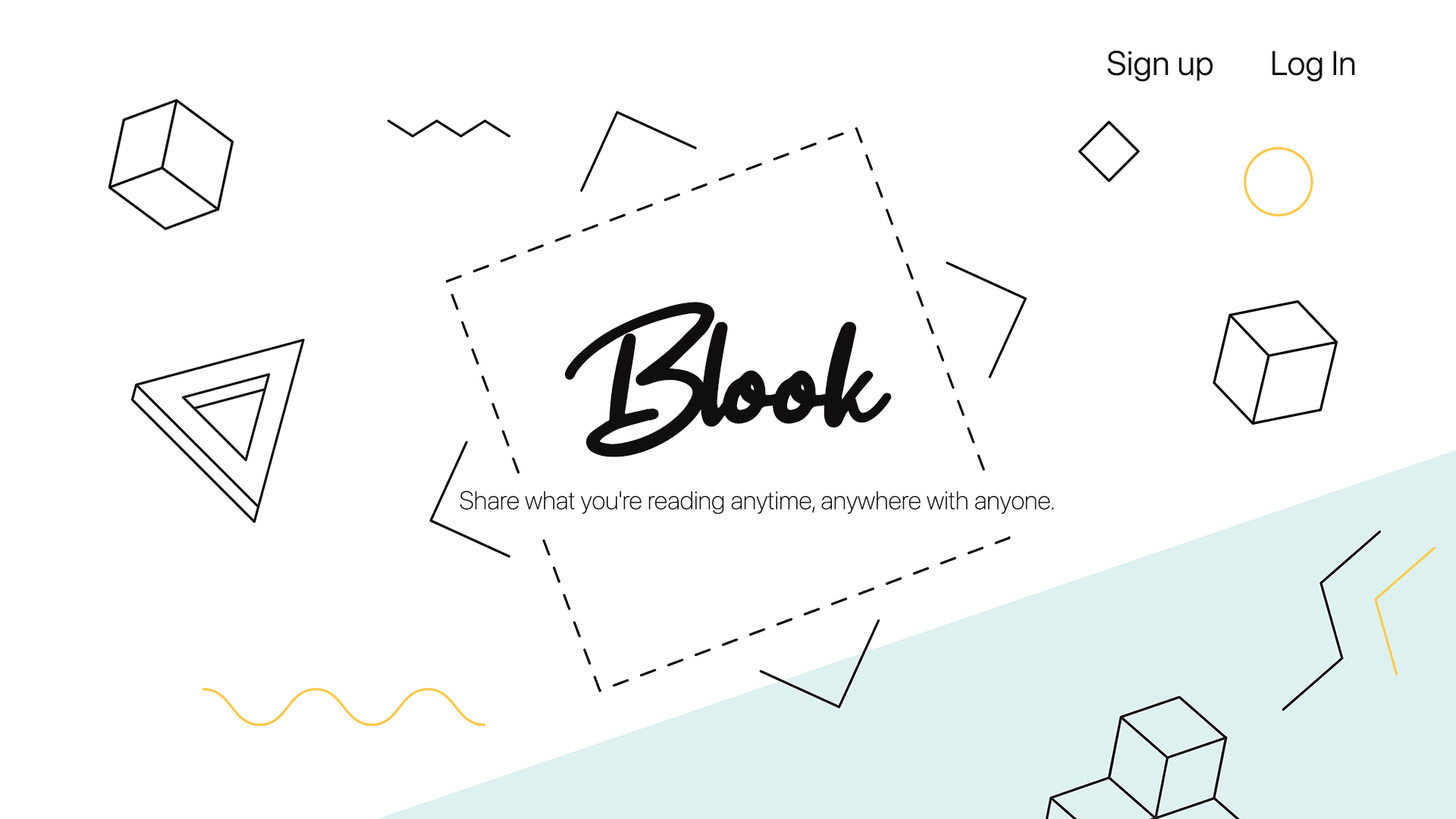
<style>
.page{position:relative;width:1456px;height:819px;background:#ffffff}
.page>*{position:absolute;margin:0}
.t1{font:33.7px "SFProDisplay-Light";color:#110e0f;font-weight:bold}
.t2{font:202.2px "Get-Show";letter-spacing:-0.05em;color:#110e0f;font-weight:bold}
.t3{font:202.2px "Get-Show";letter-spacing:-0.075em;color:#110e0f;font-weight:bold}
.t4{font:25.3px "SFProDisplay-Thin";color:#110e0f;font-weight:bold}
</style>
<div class="page">
<p class="t1" style="left:1107px;top:50px;width:248px;height:32px">Sign up   Log In</p>
<p class="t2" style="left:565px;top:302px;width:327px;height:155px"><span class="t3">B</span>look</p>
<p class="t4" style="left:460px;top:491px;width:594px;height:23px">Share what you're reading anytime, anywhere with anyone.</p>
</div>
